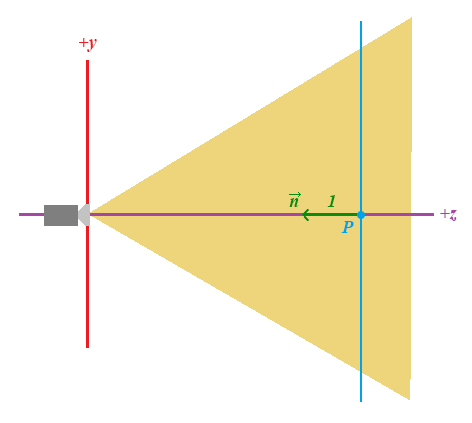
<style>
.page{position:relative;width:472px;height:423px;background:#ffffff}
.page>*{position:absolute;margin:0}
.t1{font:18.7px "TimesNewRomanPS-BoldItalicMT";color:#ed1c24}
.t2{font:18.7px "TimesNewRomanPS-BoldItalicMT";color:#0b8c11}
.t3{font:18.7px "TimesNewRomanPS-BoldItalicMT";color:#a349a4}
.t4{font:18.7px "TimesNewRomanPS-BoldItalicMT";color:#00a2e8}
</style>
<div class="page">
<p class="t1" style="left:79px;top:38px;width:18px;height:14px">+y</p>
<p class="t2" style="left:289px;top:198px;width:10px;height:9px">n</p>
<p class="t2" style="left:327px;top:195px;width:8px;height:12px">1</p>
<p class="t3" style="left:440px;top:209px;width:17px;height:12px">+z</p>
<p class="t4" style="left:341px;top:221px;width:13px;height:12px">P</p>
</div>
